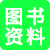
<style>
.page{position:relative;width:50px;height:50px;background:#17ff43}
.page>*{position:absolute;margin:0}
.t1{font:18px/20px "MicrosoftYaHei";letter-spacing:0.18em;color:#ffffff;font-variant:small-caps;font-weight:bold}
</style>
<div class="page">
<p class="t1" style="left:5px;top:7px;width:40px;height:39px">图书<br>资料</p>
</div>
